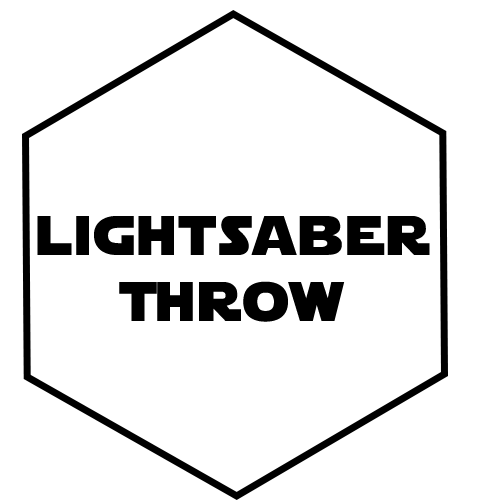
<style>
.page{position:relative;width:500px;height:500px;background:#ffffff}
.page>*{position:absolute;margin:0}
.t1{font:55px "StarJedi";letter-spacing:0.07em;color:#000000}
</style>
<div class="page">
<p class="t1" style="left:37px;top:216px;width:393px;height:106px;text-align:center">lightsaber<br>Throw</p>
</div>
